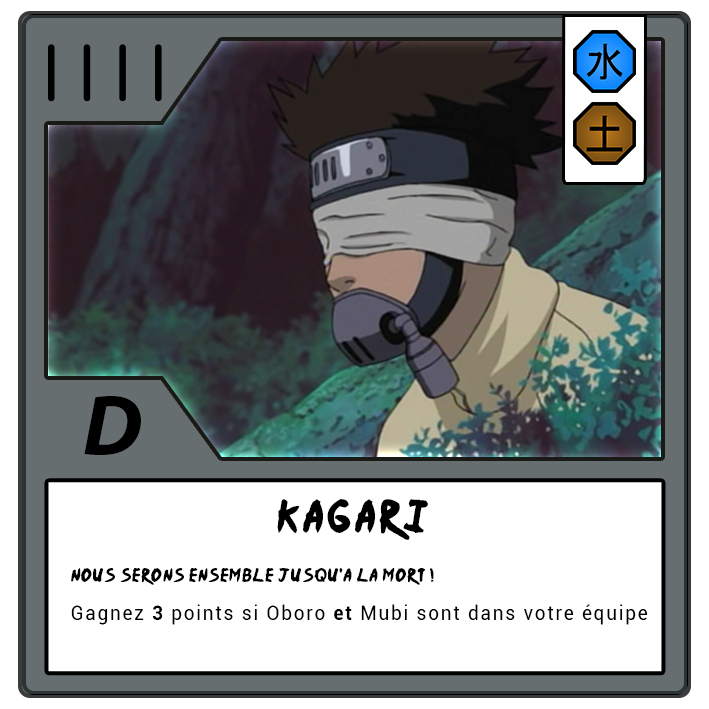
<style>
.page{position:relative;width:709px;height:709px;background:#ffffff}
.page>*{position:absolute;margin:0}
.t1{font:87.5px "MyriadPro-BoldIt";letter-spacing:-0.12em;color:#000000}
.t2{font:37.5px "Ninja-Naruto";letter-spacing:0.1em;color:#000000}
.t3{font:15.4px "Ninja-Naruto";letter-spacing:0.07em;color:#000000}
.t4{font:20.8px "Roboto-Regular";letter-spacing:0.1em;color:#000000;scale:0.9 1}
.t5{font:20.8px "Roboto-Bold";letter-spacing:0.1em;color:#000000;scale:0.9 1}
</style>
<div class="page">
<p class="t1" style="left:84px;top:396px;width:57px;height:59px">D</p>
<p class="t2" style="left:277px;top:499px;width:151px;height:41px">Kagari</p>
<p class="t3" style="left:71px;top:567px;width:363px;height:18px">Nous serons ensemble jusqu'a la mort !</p>
<p class="t4" style="left:71px;top:604px;width:577px;height:21px">Gagnez <span class="t5">3</span> points si Oboro <span class="t5">et</span> Mubi sont dans votre équipe</p>
</div>
